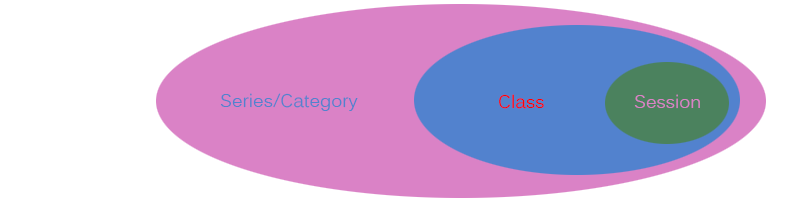
<style>
.page{position:relative;width:800px;height:200px;background:#ffffff}
.page>*{position:absolute;margin:0}
.t1{font:18px "Kalinga";color:#5282ce}
.t2{font:18px "Kalinga";color:#ff0000}
.t3{font:18px "Kalinga";color:#da82c6}
</style>
<div class="page">
<p class="t1" style="left:220px;top:93px;width:138px;height:18px">Series/Category</p>
<p class="t2" style="left:499px;top:94px;width:45px;height:15px">Class</p>
<p class="t3" style="left:634px;top:94px;width:66px;height:15px">Session</p>
</div>
